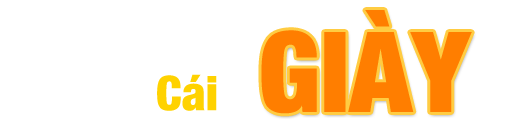
<style>
.page{position:relative;width:512px;height:132px;background:#ffffff}
.page>*{position:absolute;margin:0}
.t1{font:112px "HelveticaNeue-CondensedBlack";color:#ff7e00}
.t2{font:48px "HelveticaNeue-CondensedBlack";color:#ffd200}
</style>
<div class="page">
<p class="t1" style="left:261px;top:10px;width:211px;height:104px">GIÀY</p>
<p class="t2" style="left:157px;top:74px;width:60px;height:37px">Cái</p>
</div>
